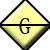
<style>
.page{position:relative;width:50px;height:50px;background:#ffffff}
.page>*{position:absolute;margin:0}
.t1{font:24px "SimSun";color:#000000}
</style>
<div class="page">
<p class="t1" style="left:19px;top:18px;width:12px;height:16px">G</p>
</div>
